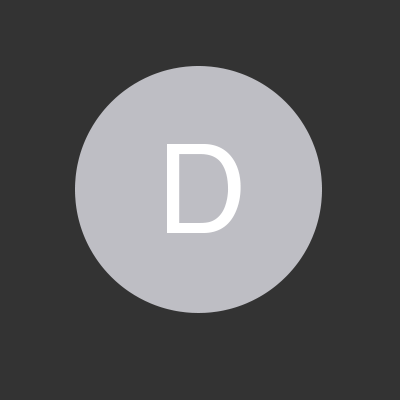
<style>
.page{position:relative;width:400px;height:400px;background:#333333}
.page>*{position:absolute;margin:0}
.t1{font:124px "Helvetica";color:#ffffff}
</style>
<div class="page">
<p class="t1" style="left:167px;top:144px;width:74px;height:89px">D</p>
</div>
